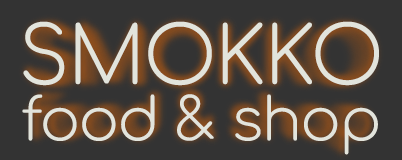
<style>
.page{position:relative;width:402px;height:160px;background:#333333}
.page>*{position:absolute;margin:0}
.t1{font:59px/50.6px "Comfortaa-Light";letter-spacing:-0.02em;color:#e2e4dc}
.t2{font:79px/50.6px "Comfortaa-Light";letter-spacing:-0.02em;color:#e2e4dc}
</style>
<div class="page">
<p class="t1" style="left:22px;top:21px;width:357px;height:134px;text-align:center"><span class="t2">SMOKKO<br></span>food &amp; shop</p>
</div>
